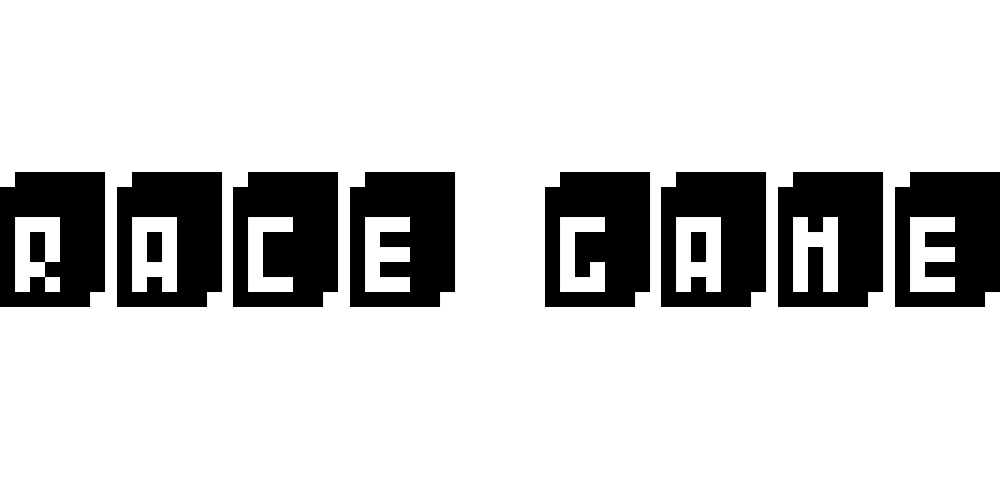
<style>
.page{position:relative;width:1000px;height:500px;background:#ffffff}
.page>*{position:absolute;margin:0}
.t1{font:240px "Pixeliza20";color:#000000}
</style>
<div class="page">
<p class="t1" style="left:0px;top:172px;width:1000px;height:135px">RACE GAME</p>
</div>
